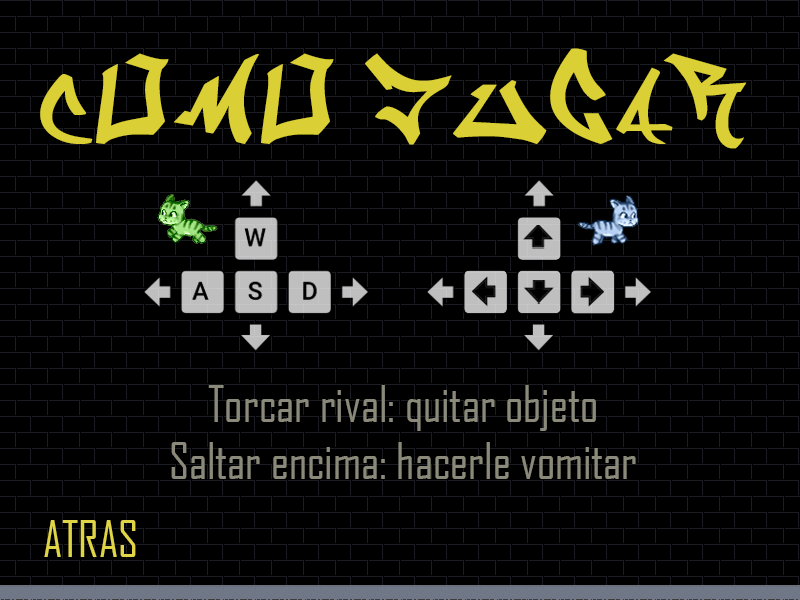
<style>
.page{position:relative;width:800px;height:600px;background:#000000}
.page>*{position:absolute;margin:0}
.t1{font:100px "Graffiti";color:#dacf34}
.t2{font:48px "AgencyFB-Reg";color:#8a897a}
.t3{font:48px "AgencyFB-Reg";color:#dfd547}
</style>
<div class="page">
<p class="t1" style="left:40px;top:48px;width:707px;height:101px">Como jugar</p>
<p class="t2" style="left:171px;top:385px;width:465px;height:94px;text-align:center">Torcar rival: quitar objeto<br>Saltar encima: hacerle vomitar</p>
<p class="t3" style="left:44px;top:520px;width:92px;height:37px">ATRAS</p>
</div>
